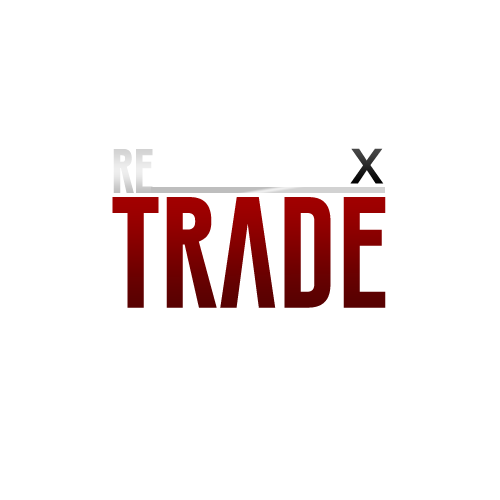
<style>
.page{position:relative;width:500px;height:500px;background:#ffffff}
.page>*{position:absolute;margin:0}
.t1{font:45.8px "GoboldExtra1";color:#dbdbdb}
.t2{font:115.1px "GoboldExtra1"}
</style>
<div class="page">
<p class="t1" style="left:113px;top:149px;width:40px;height:44px">re</p>
<p class="t2" style="left:112px;top:197px;width:274px;height:111px">Trade</p>
</div>
